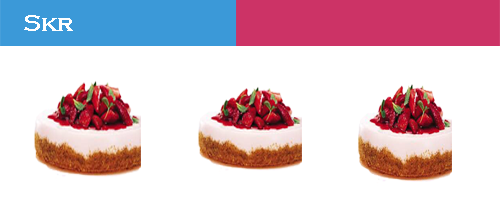
<style>
.page{position:relative;width:500px;height:200px;background:#ffffff}
.page>*{position:absolute;margin:0}
.t1{font:24px "CopperplateGothic-Bold";color:#ffffff}
</style>
<div class="page">
<p class="t1" style="left:24px;top:15px;width:49px;height:16px">Skr</p>
</div>
